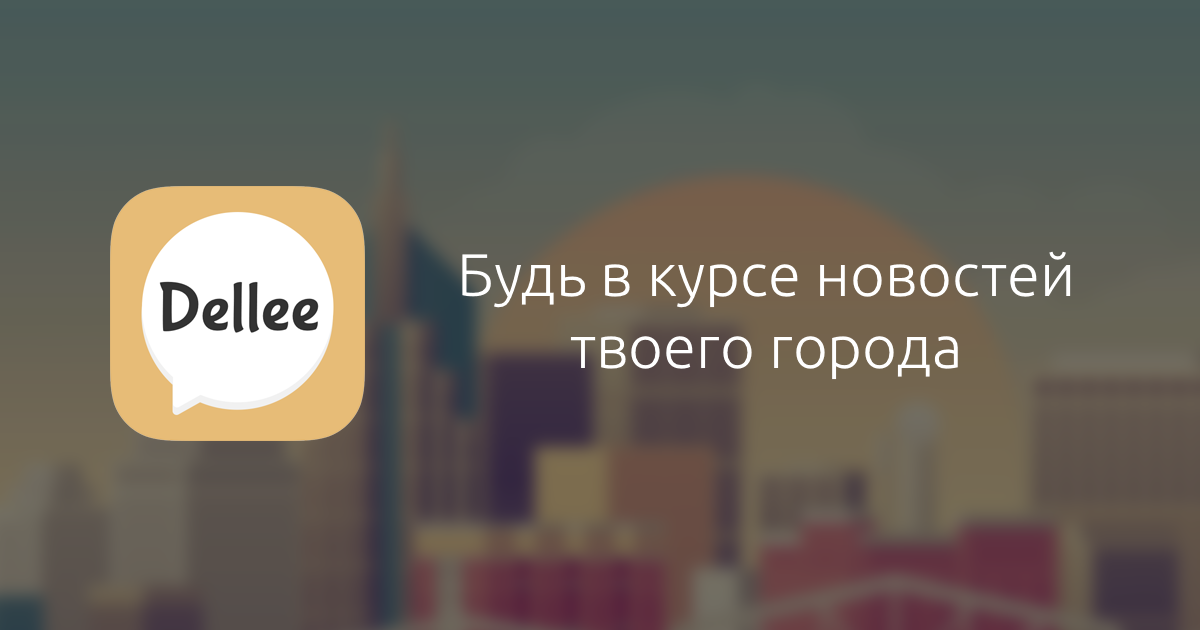
<style>
.page{position:relative;width:1200px;height:630px}
.page>*{position:absolute;margin:0}
.t1{font:60px "Ubuntu-Light";color:#ffffff}
</style>
<div class="page">
<p class="t1" style="left:462px;top:251px;width:609px;height:129px;text-align:center">Будь в курсе новостей<br>твоего города</p>
</div>
